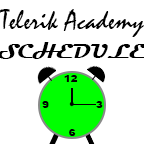
<style>
.page{position:relative;width:144px;height:144px;background:#ffffff}
.page>*{position:absolute;margin:0}
.t1{font:28px "Mistral";color:#000000}
.t2{font:10px "Arial-Black";color:#000000}
</style>
<div class="page">
<p class="t1" style="left:0px;top:9px;width:144px;height:28px">Telerik Academy</p>
<p class="t2" style="left:64px;top:75px;width:14px;height:7px">12</p>
<p class="t2" style="left:42px;top:101px;width:7px;height:7px">9</p>
<p class="t2" style="left:96px;top:101px;width:7px;height:7px">3</p>
<p class="t2" style="left:69px;top:129px;width:7px;height:7px">6</p>
</div>
